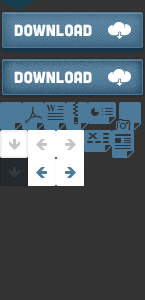
<style>
.page{position:relative;width:145px;height:300px;background:#333333}
.page>*{position:absolute;margin:0}
.t1{font:16px "Cubano-Regular";color:#fafcfe}
</style>
<div class="page">
<p class="t1" style="left:14px;top:24px;width:78px;height:13px">Download</p>
<p class="t1" style="left:14px;top:71px;width:78px;height:13px">Download</p>
</div>
